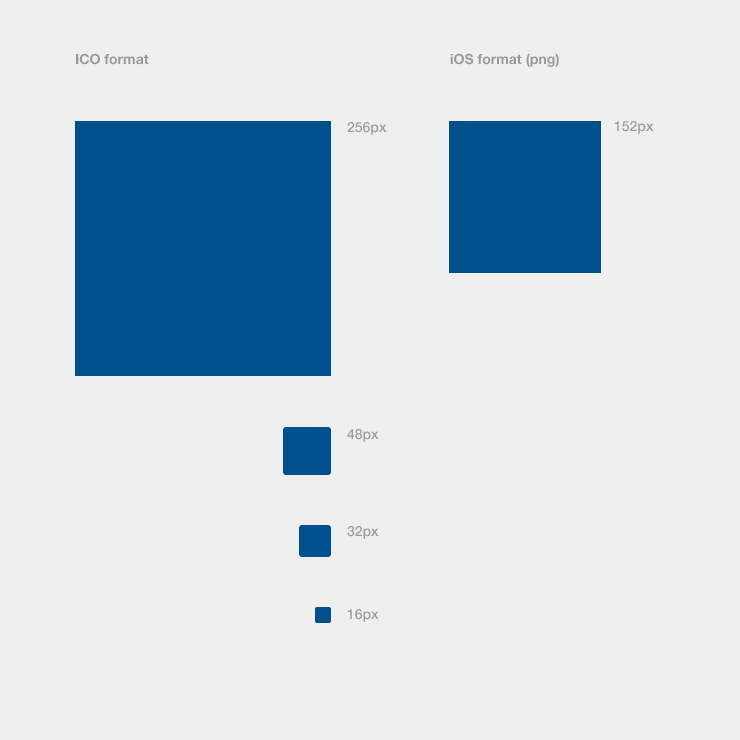
<style>
.page{position:relative;width:740px;height:740px;background:#efefef}
.page>*{position:absolute;margin:0}
.t1{font:14px "HelveticaNeueLTStd-Bd";color:#999999}
.t2{font:14px/99px "HelveticaNeueLTStd-Md";color:#999999}
.t3{font:14px/307px "HelveticaNeueLTStd-Md";color:#999999}
.t4{font:14px/97px "HelveticaNeueLTStd-Md";color:#999999}
.t5{font:14px/83px "HelveticaNeueLTStd-Md";color:#999999}
.t6{font:14px "HelveticaNeueLTStd-Md";color:#999999}
</style>
<div class="page">
<p class="t1" style="left:76px;top:53px;width:73px;height:12px">ICO format</p>
<p class="t1" style="left:450px;top:53px;width:109px;height:14px">iOS format (png)</p>
<p class="t2" style="left:347px;top:122px;width:40px;height:500px">256px<br><span class="t3">48px<br></span><span class="t4">32px<br></span><span class="t5">16px</span></p>
<p class="t6" style="left:614px;top:121px;width:40px;height:13px">152px</p>
</div>
